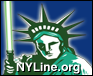
<style>
.page{position:relative;width:93px;height:76px}
.page>*{position:absolute;margin:0}
.t1{font:12px "Helvetica-Bold";color:#ffffff}
</style>
<div class="page">
<p class="t1" style="left:16px;top:62px;width:64px;height:12px">NYLine.org</p>
</div>
